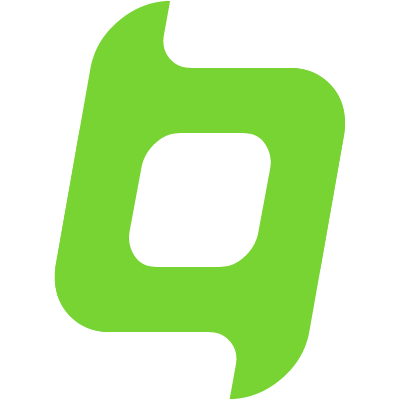
<style>
.page{position:relative;width:400px;height:400px;background:#ffffff}
.page>*{position:absolute;margin:0}
.t1{font:562.5px "Miniskip";color:#77d433}
</style>
<div class="page">
<p class="t1" style="left:55px;top:1px;width:290px;height:331px;rotate:180deg">Q</p>
<p class="t1" style="left:54px;top:68px;width:291px;height:331px">Q</p>
</div>
